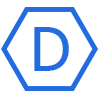
<style>
.page{position:relative;width:100px;height:100px;background:#ffffff}
.page>*{position:absolute;margin:0}
.t1{font:60px "Tahoma";color:#226ce0}
</style>
<div class="page">
<p class="t1" style="left:34px;top:27px;width:35px;height:44px">D</p>
</div>
